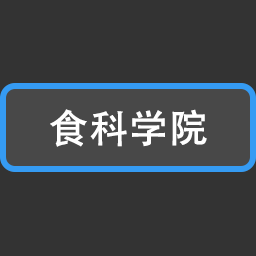
<style>
.page{position:relative;width:256px;height:256px;background:#333333}
.page>*{position:absolute;margin:0}
.t1{font:39px "AdobeHeitiStd-Regular";color:#ffffff;font-weight:bold}
</style>
<div class="page">
<p class="t1" style="left:50px;top:109px;width:157px;height:38px">食科学院</p>
</div>
